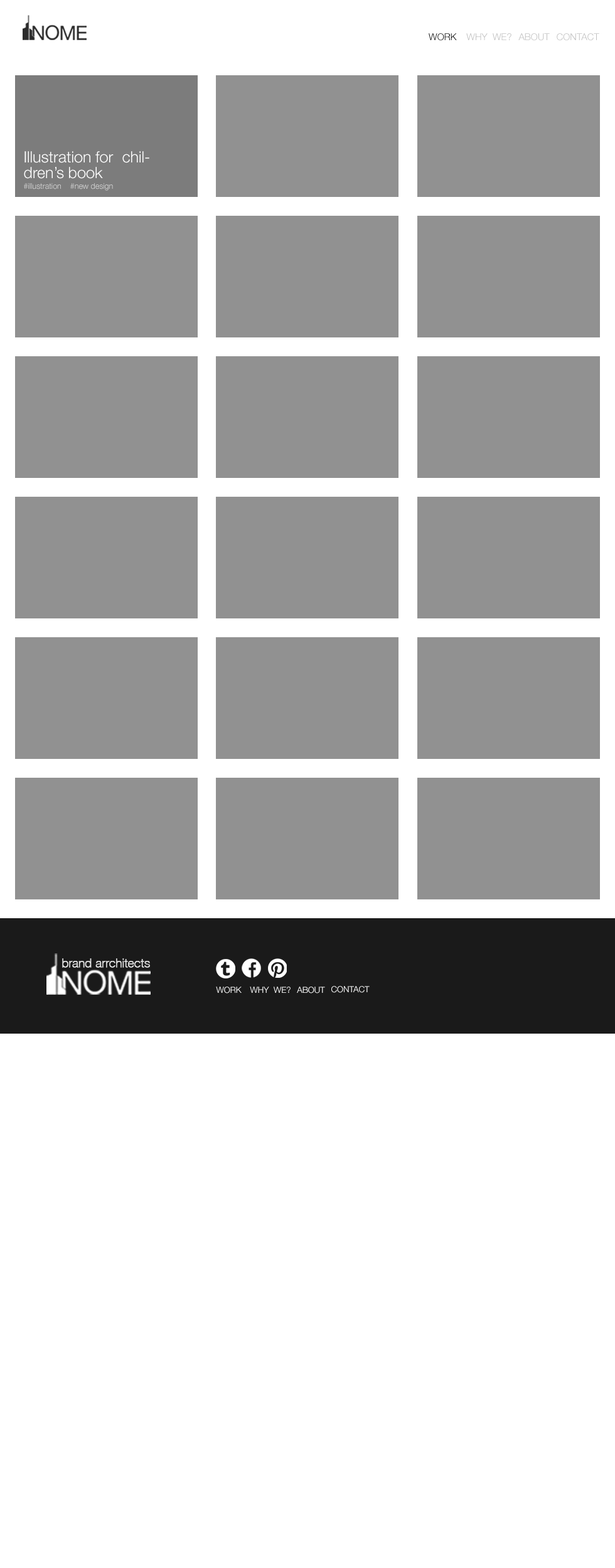
<style>
.page{position:relative;width:615px;height:1568px;background:#ffffff}
.page>*{position:absolute;margin:0}
.t1{font:9.4px "HelveticaNeue-Light";color:#000000;text-transform:uppercase}
.t2{font:9.4px "HelveticaNeue-Light";color:#bfbfbf;text-transform:uppercase}
.t3{font:15.7px/15.7px "HelveticaNeue-Light";color:#ffffff}
.t4{font:7.8px "HelveticaNeue-Light";color:#d9d9d9}
.t5{font:11.9px "HelveticaNeue-Thin";color:#e2e2e2;font-weight:bold}
.t6{font:8.5px "HelveticaNeue-Light";color:#ffffff;text-transform:uppercase}
</style>
<div class="page">
<p class="t1" style="left:428px;top:33px;width:29px;height:8px">work</p>
<p class="t1" style="left:428px;top:33px;width:29px;height:8px">work</p>
<p class="t2" style="left:466px;top:33px;width:45px;height:7px">why  we?</p>
<p class="t2" style="left:518px;top:33px;width:31px;height:8px">about</p>
<p class="t2" style="left:556px;top:33px;width:43px;height:8px">contact</p>
<p class="t3" style="left:24px;top:151px;width:125px;height:28px">Illustration for  children’s book</p>
<p class="t4" style="left:24px;top:183px;width:89px;height:8px">#illustration    #new design</p>
<p class="t5" style="left:62px;top:958px;width:88px;height:10px">brand arrchitects</p>
<p class="t6" style="left:216px;top:987px;width:25px;height:6px">work</p>
<p class="t6" style="left:250px;top:987px;width:40px;height:6px">why  we?</p>
<p class="t6" style="left:297px;top:987px;width:28px;height:6px">about</p>
<p class="t6" style="left:331px;top:986px;width:38px;height:7px">contact</p>
</div>
